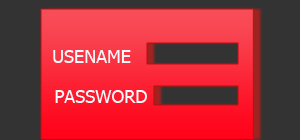
<style>
.page{position:relative;width:300px;height:140px;background:#333333}
.page>*{position:absolute;margin:0}
.t1{font:18px "Tahoma";color:#f4fafb;text-transform:uppercase}
</style>
<div class="page">
<p class="t1" style="left:53px;top:50px;width:78px;height:13px">usename</p>
<p class="t1" style="left:55px;top:90px;width:92px;height:13px">password</p>
</div>
